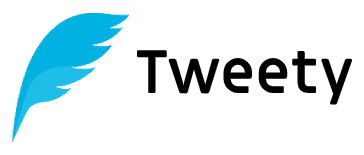
<style>
.page{position:relative;width:364px;height:155px;background:#ffffff}
.page>*{position:absolute;margin:0}
.t1{font:59.7px "MiriamLibre-Bold";color:#000000}
</style>
<div class="page">
<p class="t1" style="left:136px;top:50px;width:217px;height:55px">Tweety</p>
</div>
